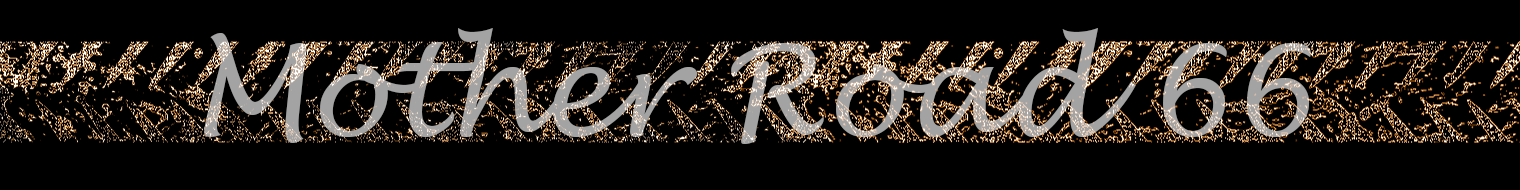
<style>
.page{position:relative;width:1520px;height:190px;background:#000000}
.page>*{position:absolute;margin:0}
.t1{font:125px "LucidaHandwriting-Italic";color:#a3a3a3}
</style>
<div class="page">
<p class="t1" style="left:204px;top:28px;width:1107px;height:116px">Mother Road 66</p>
</div>
